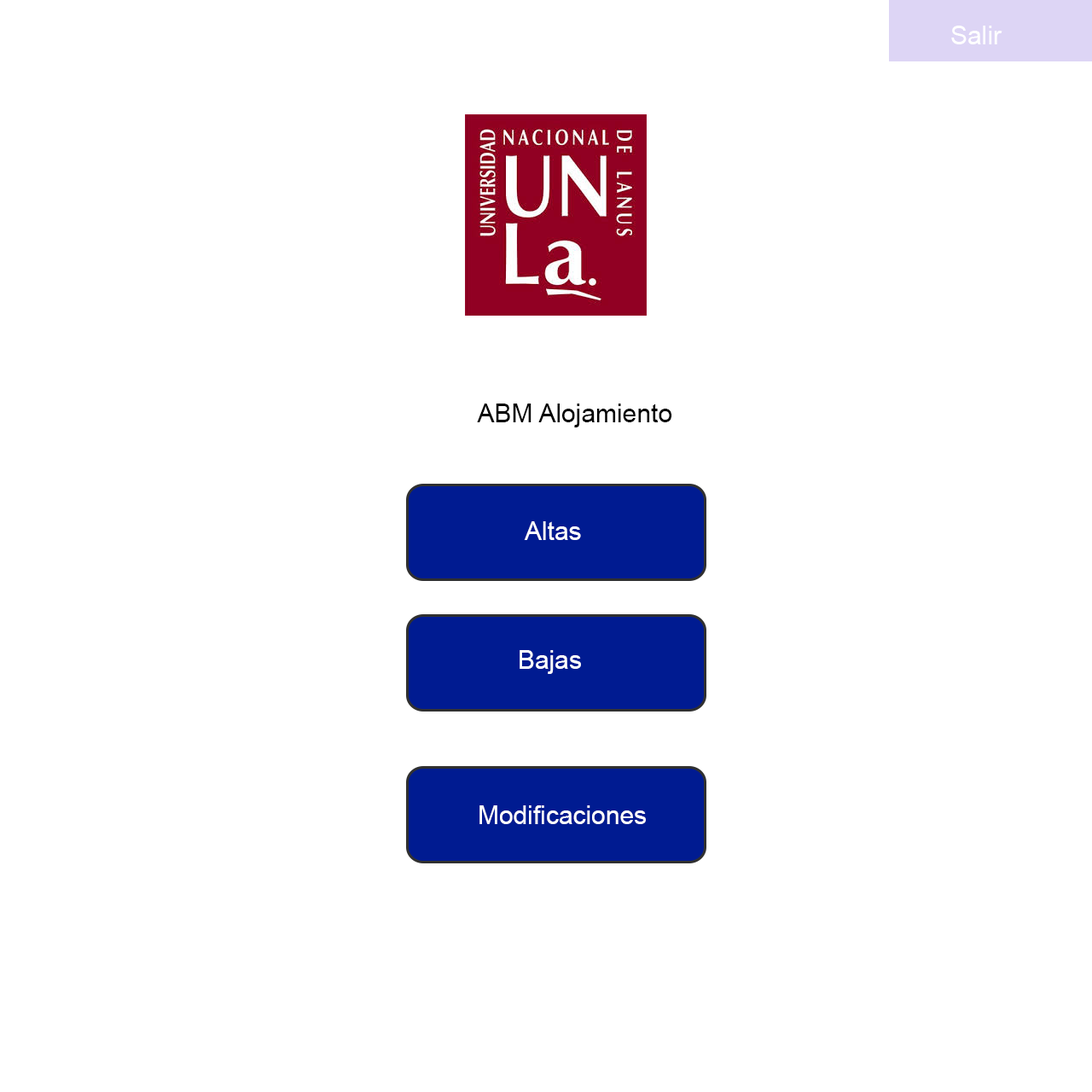
<style>
.page{position:relative;width:1092px;height:1092px;background:#ffffff}
.page>*{position:absolute;margin:0}
.t1{font:25.6px "ArialMT";color:#ffffff}
.t2{font:25.6px "ArialMT";color:#000000}
</style>
<div class="page">
<p class="t1" style="left:951px;top:26px;width:51px;height:18px">Salir</p>
<p class="t2" style="left:477px;top:404px;width:195px;height:23px">ABM Alojamiento</p>
<p class="t1" style="left:524px;top:521px;width:57px;height:19px">Altas</p>
<p class="t1" style="left:520px;top:650px;width:61px;height:24px">Bajas</p>
<p class="t1" style="left:479px;top:805px;width:167px;height:19px">Modificaciones</p>
</div>
